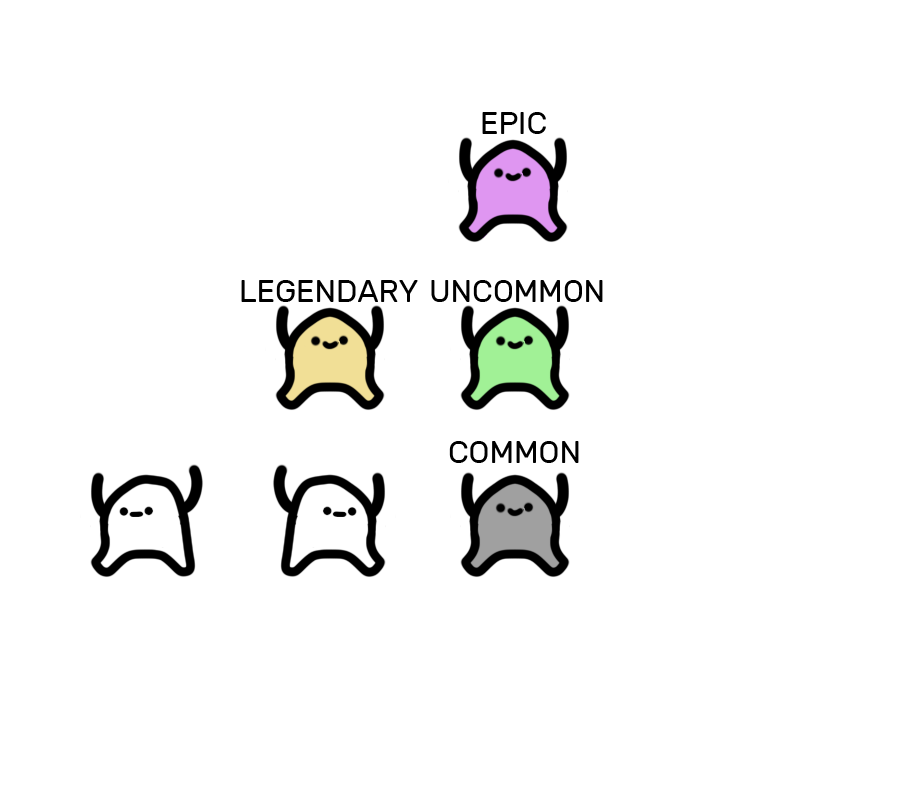
<style>
.page{position:relative;width:900px;height:800px;background:#ffffff}
.page>*{position:absolute;margin:0}
.t1{font:31px "Rubik-Regular";color:#000000}
</style>
<div class="page">
<p class="t1" style="left:482px;top:112px;width:64px;height:22px">EPIC</p>
<p class="t1" style="left:241px;top:280px;width:177px;height:22px">LEGENDARY</p>
<p class="t1" style="left:431px;top:280px;width:172px;height:22px">UNCOMMON</p>
<p class="t1" style="left:449px;top:441px;width:130px;height:22px">COMMON</p>
</div>
